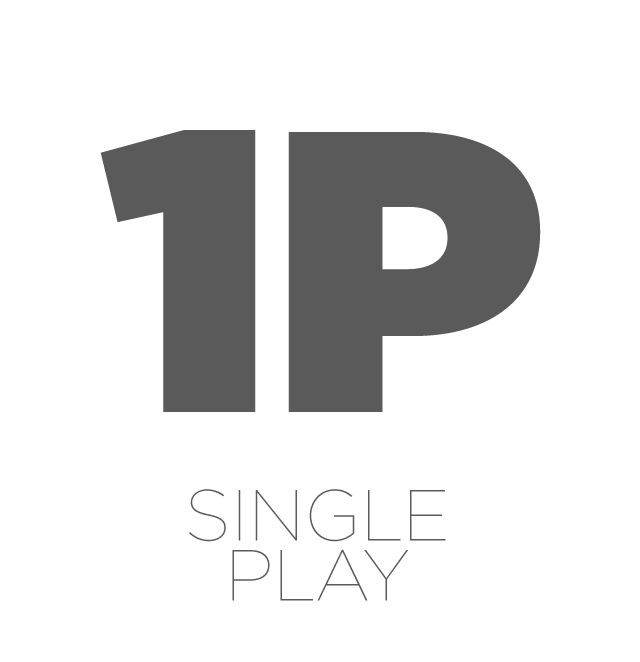
<style>
.page{position:relative;width:640px;height:662px;background:#ffffff}
.page>*{position:absolute;margin:0}
.t1{font:400px "Gotham-Ultra";color:#5a5a5a}
.t2{font:72px/60px "Gotham-Thin";color:#5a5a5a}
</style>
<div class="page">
<p class="t1" style="left:100px;top:130px;width:441px;height:282px">1P</p>
<p class="t2" style="left:189px;top:489px;width:257px;height:112px;text-align:center">SINGLE<br>PLAY</p>
</div>
